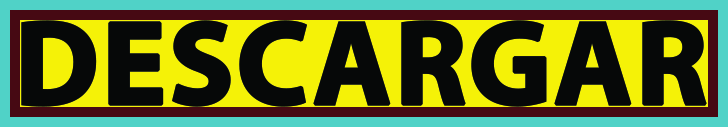
<style>
.page{position:relative;width:728px;height:127px;background:#060808}
.page>*{position:absolute;margin:0}
.t1{font:120px "MyriadPro-Bold";color:#060808;font-weight:bold}
</style>
<div class="page">
<p class="t1" style="left:21px;top:20px;width:686px;height:87px">DESCARGAR</p>
</div>
